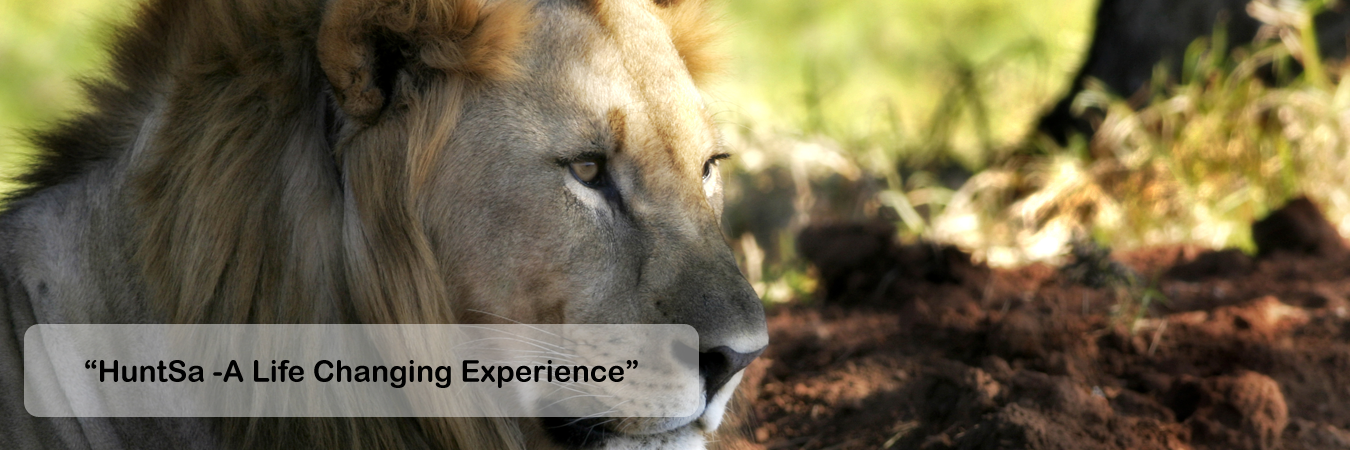
<style>
.page{position:relative;width:1350px;height:450px}
.page>*{position:absolute;margin:0}
.t1{font:30px "ArialRoundedMTBold";color:#000000}
</style>
<div class="page">
<p class="t1" style="left:85px;top:360px;width:553px;height:28px">“HuntSa -A Life Changing Experience”</p>
</div>
